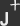
<style>
.page{position:relative;width:20px;height:26px;background:#333333}
.page>*{position:absolute;margin:0}
.t1{font:12px "DFKaiShu-SB-Estd-BF";color:#ececec;font-weight:bold}
.t2{font:18px "ArialMT";color:#ececec;font-weight:bold}
</style>
<div class="page">
<p class="t1" style="left:10px;top:0px;width:10px;height:11px">十</p>
<p class="t2" style="left:0px;top:12px;width:8px;height:14px">J</p>
</div>
